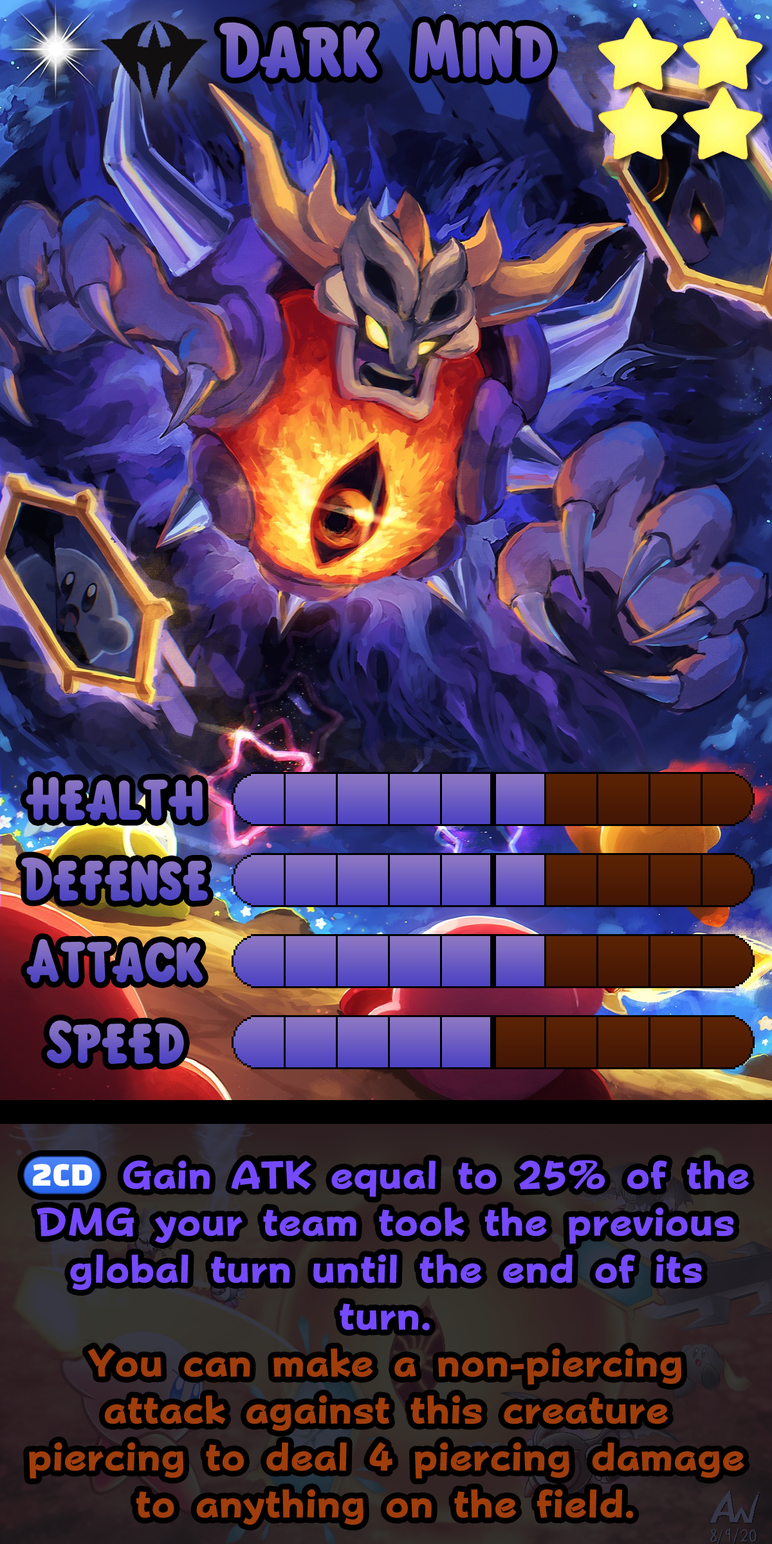
<style>
.page{position:relative;width:772px;height:1544px}
.page>*{position:absolute;margin:0}
.t1{font:119.7px "KirbyClassic"}
.t2{font:92.7px "KirbyClassic"}
.t3{font:66.9px/47px "FOTPopHappinessStrp-ExtraBold";color:#9f3d0c}
.t4{font:66.9px/47px "stoogedings-Regular";color:#754aff}
.t5{font:66.9px/47px "FOTPopHappinessStrp-ExtraBold";color:#754aff}
</style>
<div class="page">
<p class="t1" style="left:219px;top:19px;width:333px;height:61px">Dark Mind</p>
<p class="t2" style="left:26px;top:777px;width:177px;height:44px">Health</p>
<p class="t2" style="left:21px;top:858px;width:187px;height:44px">Defense</p>
<p class="t2" style="left:26px;top:939px;width:177px;height:44px">Attack</p>
<p class="t2" style="left:46px;top:1021px;width:138px;height:43px">Speed</p>
<p class="t3" style="left:23px;top:1156px;width:726px;height:369px;text-align:center"><span class="t4">(2CD)</span><span class="t5"> Gain ATK equal to 25% of the DMG your team took the previous global turn until the end of its turn.<br></span>You can make a non-piercing attack against this creature piercing to deal 4 piercing damage to anything on the field.</p>
</div>
